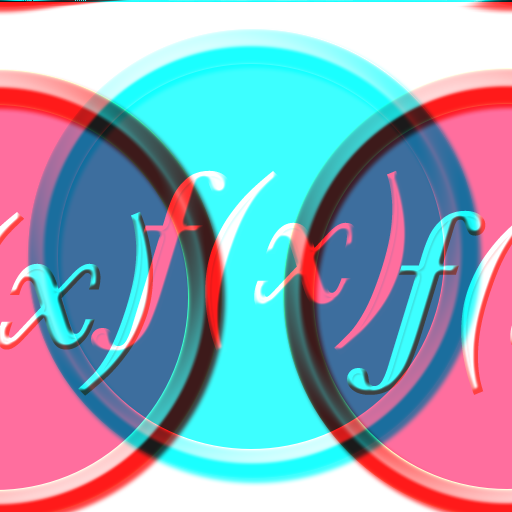
<style>
.page{position:relative;width:512px;height:512px}
.page>*{position:absolute;margin:0}
.t1{font:200px "Baskerville-SemiBoldItalic"}
</style>
<div class="page">
<p class="t1" style="left:91px;top:168px;width:318px;height:185px">f(x)</p>
</div>
